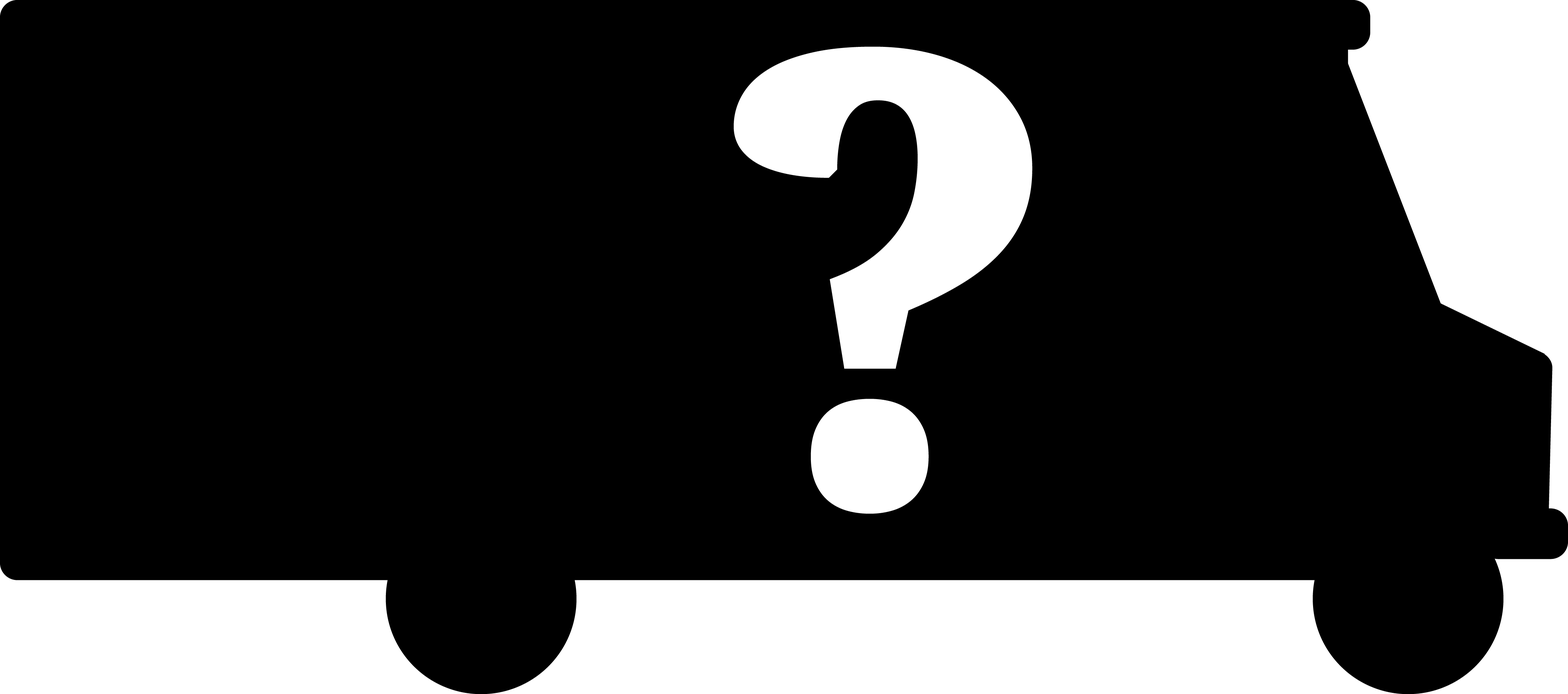
<style>
.page{position:relative;width:1568px;height:694px;background:#000000}
.page>*{position:absolute;margin:0}
.t1{font:614.9px "DroidSerif-Bold";letter-spacing:0.24em;color:#ffffff;font-weight:bold}
</style>
<div class="page">
<p class="t1" style="left:733px;top:46px;width:299px;height:468px">?</p>
</div>
